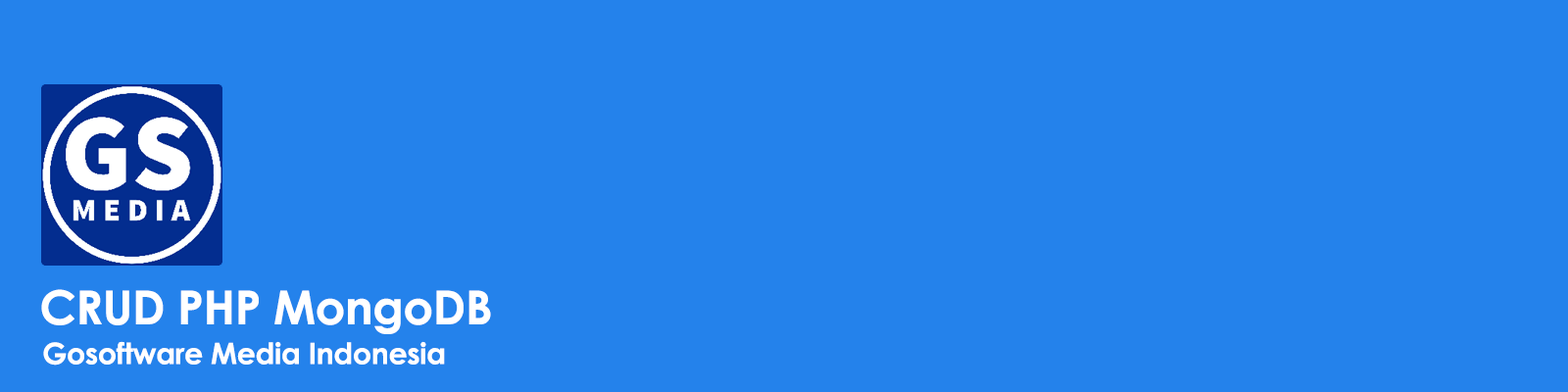
<style>
.page{position:relative;width:1568px;height:392px;background:#2482eb}
.page>*{position:absolute;margin:0}
.t1{font:47px "CenturyGothic-Bold";letter-spacing:-0.01em;color:#ffffff}
.t2{font:29.4px "CenturyGothic-Bold";letter-spacing:-0.01em;color:#ffffff}
</style>
<div class="page">
<p class="t1" style="left:41px;top:289px;width:450px;height:45px">CRUD PHP MongoDB</p>
<p class="t2" style="left:43px;top:341px;width:402px;height:25px">Gosoftware Media Indonesia</p>
</div>
